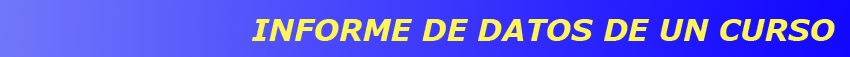
<style>
.page{position:relative;width:850px;height:57px}
.page>*{position:absolute;margin:0}
.t1{font:30px "Verdana-BoldItalic";color:#fff557}
</style>
<div class="page">
<p class="t1" style="left:252px;top:19px;width:583px;height:22px">INFORME DE DATOS DE UN CURSO</p>
</div>
